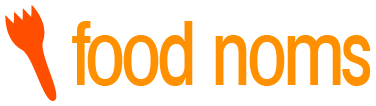
<style>
.page{position:relative;width:376px;height:106px;background:#ffffff}
.page>*{position:absolute;margin:0}
.t1{font:88.3px "AvantGardeLT-CondMedium";letter-spacing:-0.05em;color:#ff9000;scale:0.9 1}
</style>
<div class="page">
<p class="t1" style="left:72px;top:21px;width:299px;height:65px">food noms</p>
</div>
